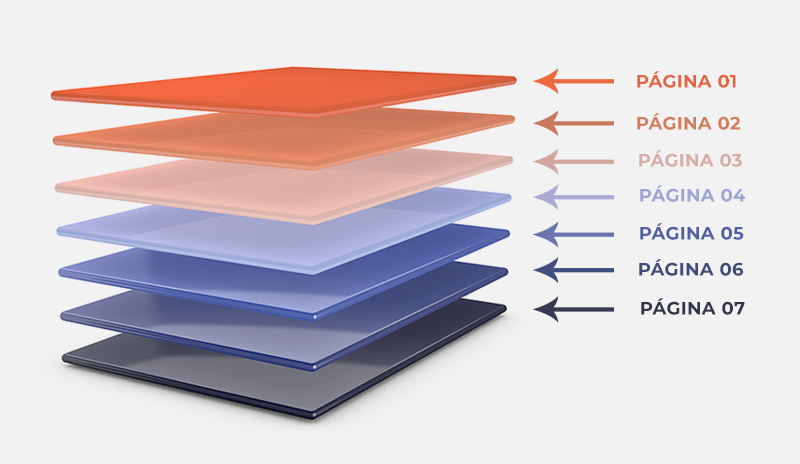
<style>
.page{position:relative;width:800px;height:464px;background:#f2f2f2}
.page>*{position:absolute;margin:0}
.t1{font:18px "Montserrat-Bold";letter-spacing:0.02em;color:#e46541}
.t2{font:18px "Montserrat-Bold";letter-spacing:0.02em;color:#d37d5f}
.t3{font:18px "Montserrat-Bold";letter-spacing:0.02em;color:#d8ada7}
.t4{font:18px "Montserrat-Bold";letter-spacing:0.02em;color:#9ea5d4}
.t5{font:18px "Montserrat-Bold";letter-spacing:0.02em;color:#515fa3}
.t6{font:18px "Montserrat-Bold";letter-spacing:0.02em;color:#414a7b}
.t7{font:18px "Montserrat-Bold";letter-spacing:0.02em;color:#33354b}
</style>
<div class="page">
<p class="t1" style="left:637px;top:71px;width:99px;height:17px">PÁGINA 01</p>
<p class="t2" style="left:637px;top:113px;width:103px;height:17px">PÁGINA 02</p>
<p class="t3" style="left:639px;top:150px;width:103px;height:17px">PÁGINA 03</p>
<p class="t4" style="left:640px;top:185px;width:106px;height:17px">PÁGINA 04</p>
<p class="t5" style="left:640px;top:223px;width:104px;height:17px">PÁGINA 05</p>
<p class="t6" style="left:639px;top:259px;width:104px;height:17px">PÁGINA 06</p>
<p class="t7" style="left:641px;top:298px;width:104px;height:17px">PÁGINA 07</p>
</div>
